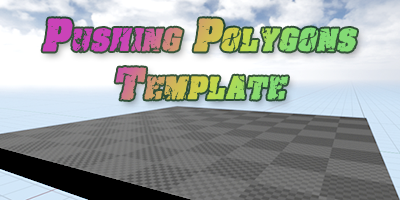
<style>
.page{position:relative;width:400px;height:200px}
.page>*{position:absolute;margin:0}
.t1{font:48px/48px "CFCrackandBold-Regular";font-variant:small-caps;font-style:italic}
</style>
<div class="page">
<p class="t1" style="left:42px;top:18px;width:315px;height:82px;text-align:center">Pushing Polygons<br>Template</p>
</div>
